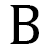
<style>
.page{position:relative;width:50px;height:50px;background:#ffffff}
.page>*{position:absolute;margin:0}
.t1{font:58.3px "CambriaMath";color:#000000}
</style>
<div class="page">
<p class="t1" style="left:10px;top:5px;width:29px;height:39px">B</p>
</div>
